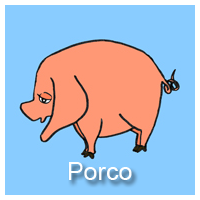
<style>
.page{position:relative;width:200px;height:200px;background:#89ccff}
.page>*{position:absolute;margin:0}
.t1{font:25px "ArialMT";color:#ffffff}
</style>
<div class="page">
<p class="t1" style="left:69px;top:162px;width:63px;height:18px">Porco</p>
</div>
